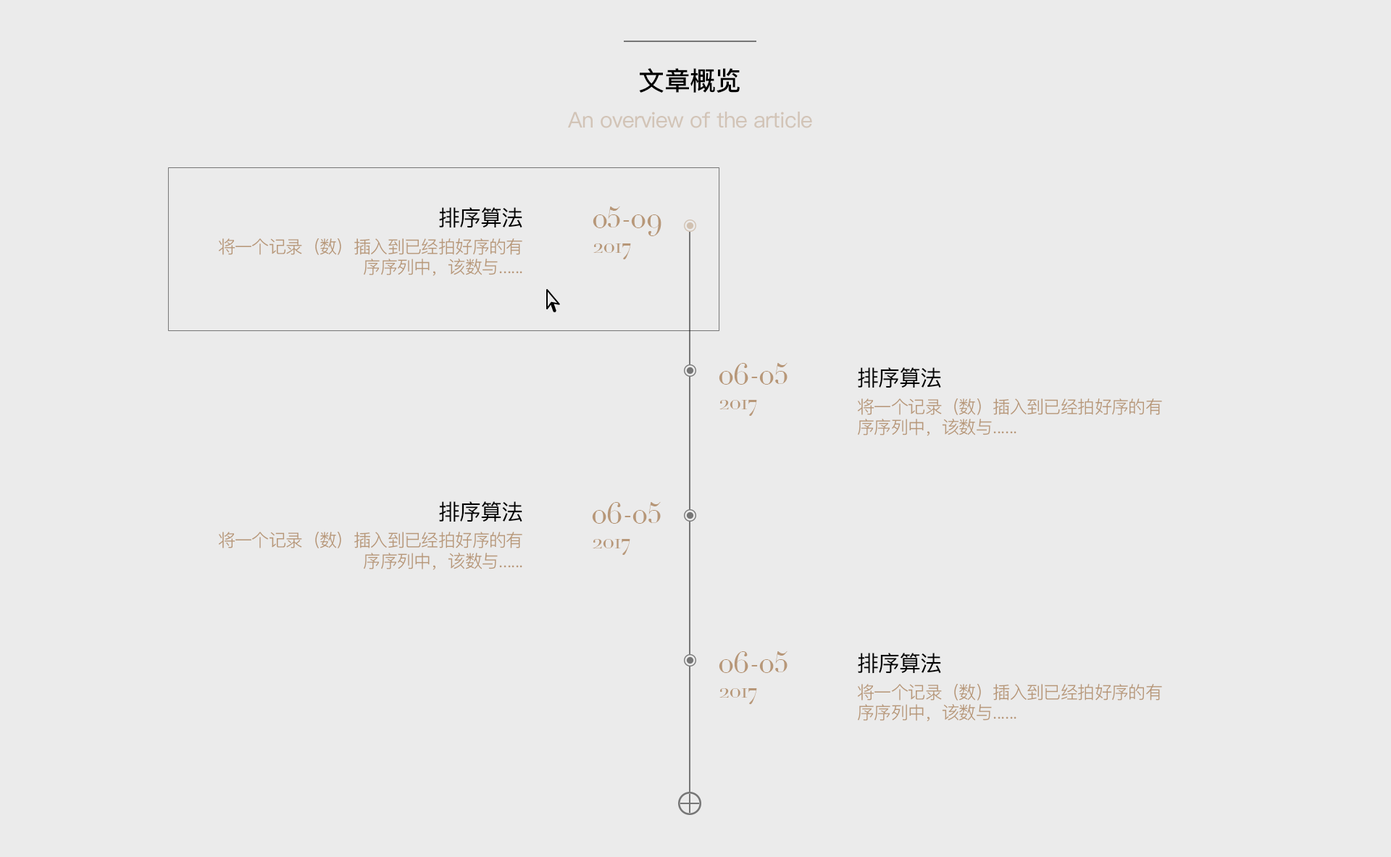
<style>
.page{position:relative;width:1391px;height:857px;background:#ebebeb}
.page>*{position:absolute;margin:0}
.t1{font:26.1px "PingFangSC-Medium";letter-spacing:-0.025em;color:#000000}
.t2{font:21.7px "PingFangSC-Regular";letter-spacing:-0.025em;color:#d2c4b7}
.t3{font:21.7px "PingFangSC-Regular";letter-spacing:-0.025em;color:#000000}
.t4{font:29px "Didot";letter-spacing:-0.025em;color:#b79778}
.t5{font:17.4px "PingFangSC-Light";letter-spacing:-0.025em;color:#b79778}
.t6{font:21.7px "Didot";letter-spacing:-0.025em;color:#b79778}
</style>
<div class="page">
<p class="t1" style="left:639px;top:68px;width:101px;height:25px">文章概览</p>
<p class="t2" style="left:568px;top:112px;width:244px;height:16px">An overview of the article</p>
<p class="t3" style="left:439px;top:207px;width:83px;height:21px">排序算法</p>
<p class="t4" style="left:593px;top:206px;width:69px;height:30px">05-09</p>
<p class="t5" style="left:219px;top:238px;width:303px;height:38px;text-align:right">将一个记录（数）插入到已经拍好序的有序序列中，该数与......</p>
<p class="t6" style="left:593px;top:243px;width:38px;height:16px">2017</p>
<p class="t4" style="left:719px;top:362px;width:69px;height:23px">06-05</p>
<p class="t3" style="left:858px;top:367px;width:83px;height:21px">排序算法</p>
<p class="t6" style="left:719px;top:400px;width:38px;height:16px">2017</p>
<p class="t5" style="left:858px;top:399px;width:304px;height:37px">将一个记录（数）插入到已经拍好序的有序序列中，该数与......</p>
<p class="t3" style="left:439px;top:501px;width:83px;height:21px">排序算法</p>
<p class="t4" style="left:592px;top:501px;width:69px;height:23px">06-05</p>
<p class="t5" style="left:219px;top:532px;width:303px;height:38px;text-align:right">将一个记录（数）插入到已经拍好序的有序序列中，该数与......</p>
<p class="t6" style="left:593px;top:539px;width:37px;height:16px">2017</p>
<p class="t4" style="left:719px;top:651px;width:69px;height:22px">06-05</p>
<p class="t3" style="left:858px;top:653px;width:83px;height:21px">排序算法</p>
<p class="t6" style="left:719px;top:688px;width:38px;height:16px">2017</p>
<p class="t5" style="left:858px;top:684px;width:304px;height:38px">将一个记录（数）插入到已经拍好序的有序序列中，该数与......</p>
</div>
